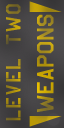
<style>
.page{position:relative;width:64px;height:128px}
.page>*{position:absolute;margin:0}
.t1{font:20px "USAAF_Stencil";letter-spacing:0.1em}
.t2{font:23px "USAAF_Stencil";letter-spacing:0.04em}
</style>
<div class="page">
<p class="t1" style="left:6px;top:4px;width:15px;height:117px;rotate:-90deg">LEVEL TWO</p>
<p class="t2" style="left:37px;top:14px;width:17px;height:99px;rotate:-90deg">weapons</p>
</div>
